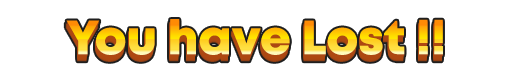
<style>
.page{position:relative;width:512px;height:83px;background:#ffffff}
.page>*{position:absolute;margin:0}
.t1{font:48.1px "Mont-HeavyDEMO"}
</style>
<div class="page">
<p class="t1" style="left:66px;top:19px;width:377px;height:36px">You have Lost !!</p>
</div>
